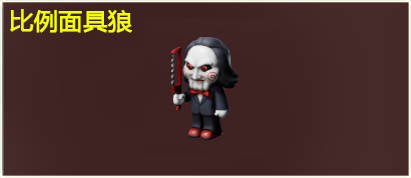
<style>
.page{position:relative;width:411px;height:178px}
.page>*{position:absolute;margin:0}
.t1{font:24px "MicrosoftYaHeiUI";color:#f4ff00;font-weight:bold}
</style>
<div class="page">
<p class="t1" style="left:10px;top:9px;width:122px;height:24px">比例面具狼</p>
</div>
